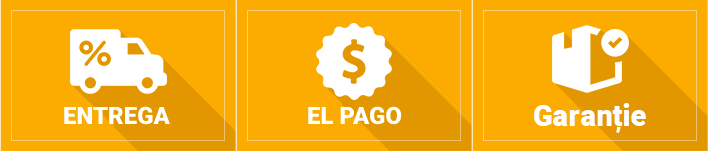
<style>
.page{position:relative;width:708px;height:151px;background:#fcac00}
.page>*{position:absolute;margin:0}
.t1{font:24px "Roboto-Black";color:#ffffff}
</style>
<div class="page">
<p class="t1" style="left:64px;top:106px;width:106px;height:19px">ENTREGA</p>
<p class="t1" style="left:308px;top:106px;width:94px;height:19px">EL PAGO</p>
</div>
